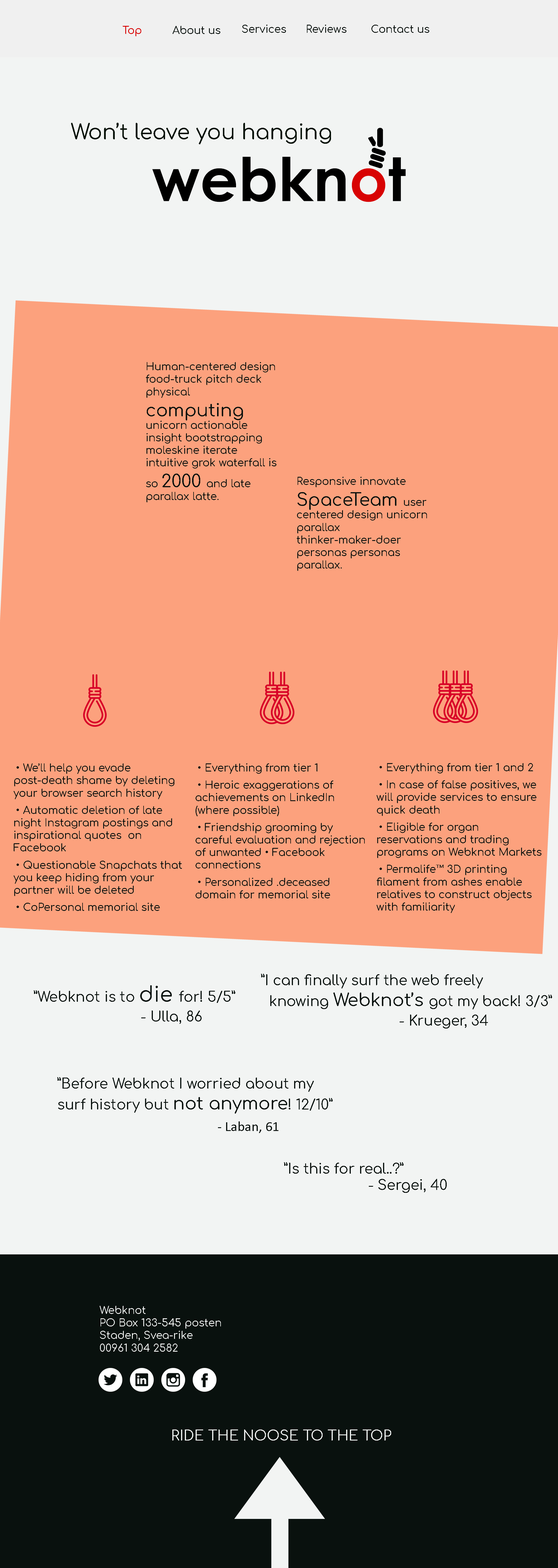
<style>
.page{position:relative;width:558px;height:1568px;background:#f2f4f3}
.page>*{position:absolute;margin:0}
.t1{font:10.5px "Comfortaa-Regular";color:#d80303}
.t2{font:10.5px "Comfortaa-Regular";color:#09110e}
.t3{font:20.9px "Comfortaa-Regular";color:#071108}
.t4{font:17.4px "Comfortaa-Regular";color:#09110e}
.t5{font:13.9px "Comfortaa-Regular";color:#09110e}
.t6{font:20.9px "Comfortaa-Regular";color:#09110e}
.t7{font:13.9px "Calibri";color:#09110e}
.t8{font:10.5px "Comfortaa-Regular";color:#f2f4f3}
.t9{font:13.9px "Comfortaa-Regular";color:#f2f4f3}
</style>
<div class="page">
<p class="t1" style="left:123px;top:26px;width:18px;height:10px">Top</p>
<p class="t2" style="left:172px;top:26px;width:48px;height:8px">About us</p>
<p class="t2" style="left:242px;top:25px;width:44px;height:8px">Services</p>
<p class="t2" style="left:307px;top:25px;width:39px;height:8px">Reviews</p>
<p class="t2" style="left:371px;top:25px;width:58px;height:8px">Contact us</p>
<p class="t3" style="left:71px;top:123px;width:260px;height:21px">Won’t leave you hanging</p>
<p class="t2" style="left:146px;top:362px;width:130px;height:140px">Human-centered design food-truck pitch deck physical <span class="t4">computing </span>unicorn actionable insight bootstrapping moleskine iterate intuitive grok waterfall is so <span class="t4">2000 </span>and late parallax latte.</p>
<p class="t2" style="left:296px;top:477px;width:131px;height:94px">Responsive innovate <span class="t4">SpaceTeam </span>user centered design unicorn parallax thinker-maker-doer personas personas parallax.</p>
<p class="t2" style="left:14px;top:763px;width:168px;height:148px">• We’ll help you evade post-death shame by deleting your browser search history<br>• Automatic deletion of late night Instagram postings and inspirational quotes  on Facebook<br>• Questionable Snapchats that you keep hiding from your partner will be deleted<br>• CoPersonal memorial site</p>
<p class="t2" style="left:195px;top:763px;width:169px;height:135px">• Everything from tier 1<br>• Heroic exaggerations of achievements on LinkedIn (where possible)<br>• Friendship grooming by careful evaluation and rejection of unwanted • Facebook connections<br>• Personalized .deceased domain for memorial site</p>
<p class="t2" style="left:376px;top:763px;width:165px;height:150px">• Everything from tier 1 and 2<br>• In case of false positives, we will provide services to ensure quick death<br>• Eligible for organ reservations and trading programs on Webknot Markets<br>• Permalife™ 3D printing filament from ashes enable relatives to construct objects with familiarity</p>
<p class="t5" style="left:261px;top:974px;width:291px;height:35px">”I can finally surf the web freely <br>  knowing <span class="t4">Webknot’s </span>got my back! 3/3”</p>
<p class="t5" style="left:34px;top:985px;width:201px;height:18px">”Webknot is to <span class="t6">die </span>for! 5/5”</p>
<p class="t5" style="left:141px;top:1010px;width:61px;height:14px">- Ulla, 86</p>
<p class="t5" style="left:399px;top:1015px;width:89px;height:13px">- Krueger, 34</p>
<p class="t5" style="left:57px;top:1077px;width:275px;height:37px">”Before Webknot I worried about my <br>surf history but <span class="t4">not anymore</span>! 12/10”</p>
<p class="t7" style="left:218px;top:1121px;width:60px;height:12px">- Laban, 61</p>
<p class="t5" style="left:284px;top:1162px;width:119px;height:12px">”Is this for real..?”</p>
<p class="t5" style="left:368px;top:1179px;width:78px;height:14px">- Sergei, 40</p>
<p class="t8" style="left:100px;top:1306px;width:121px;height:46px">Webknot<br>PO Box 133-545 posten<br>Staden, Svea-rike<br>00961 304 2582</p>
<p class="t9" style="left:172px;top:1429px;width:219px;height:12px">RIDE THE NOOSE TO THE TOP</p>
</div>
